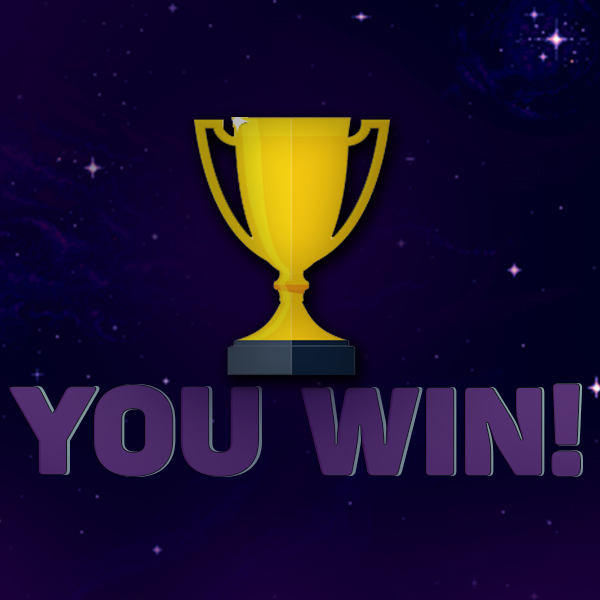
<style>
.page{position:relative;width:600px;height:600px}
.page>*{position:absolute;margin:0}
.t1{font:125.5px "Panton-ExtraBlack";color:#492966}
.t2{font:125.5px "Panton-ExtraBlack";color:#4b2a68}
.t3{font:125.5px "Panton-ExtraBlack";color:#4c2a69}
.t4{font:125.5px "Panton-ExtraBlack";color:#4d2c6a}
</style>
<div class="page">
<p class="t1" style="left:8px;top:384px;width:251px;height:93px">YOU</p>
<p class="t2" style="left:11px;top:384px;width:251px;height:93px">YOU</p>
<p class="t3" style="left:300px;top:383px;width:281px;height:94px">WIN!</p>
<p class="t4" style="left:303px;top:383px;width:280px;height:94px">WIN!</p>
</div>
